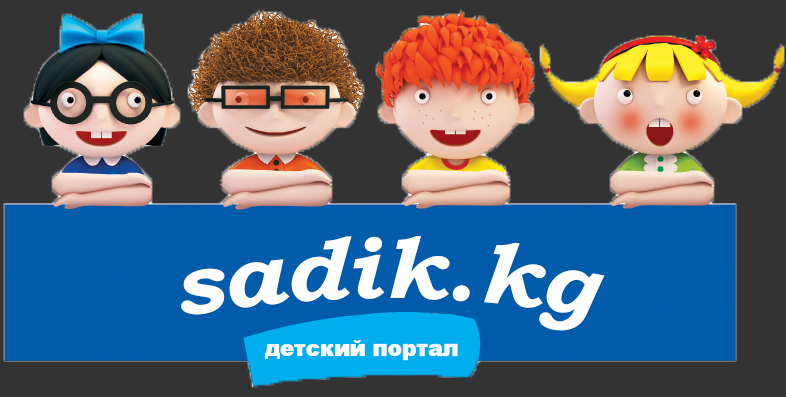
<style>
.page{position:relative;width:786px;height:397px;background:#333333}
.page>*{position:absolute;margin:0}
.t1{font:87px "BookmanOldStyle-BoldItalic";color:#ffffff}
.t2{font:22px "Arial-Black";color:#ffffff}
</style>
<div class="page">
<p class="t1" style="left:181px;top:236px;width:424px;height:95px">sadik.kg</p>
<p class="t2" style="left:264px;top:340px;width:194px;height:21px">детский портал</p>
</div>
